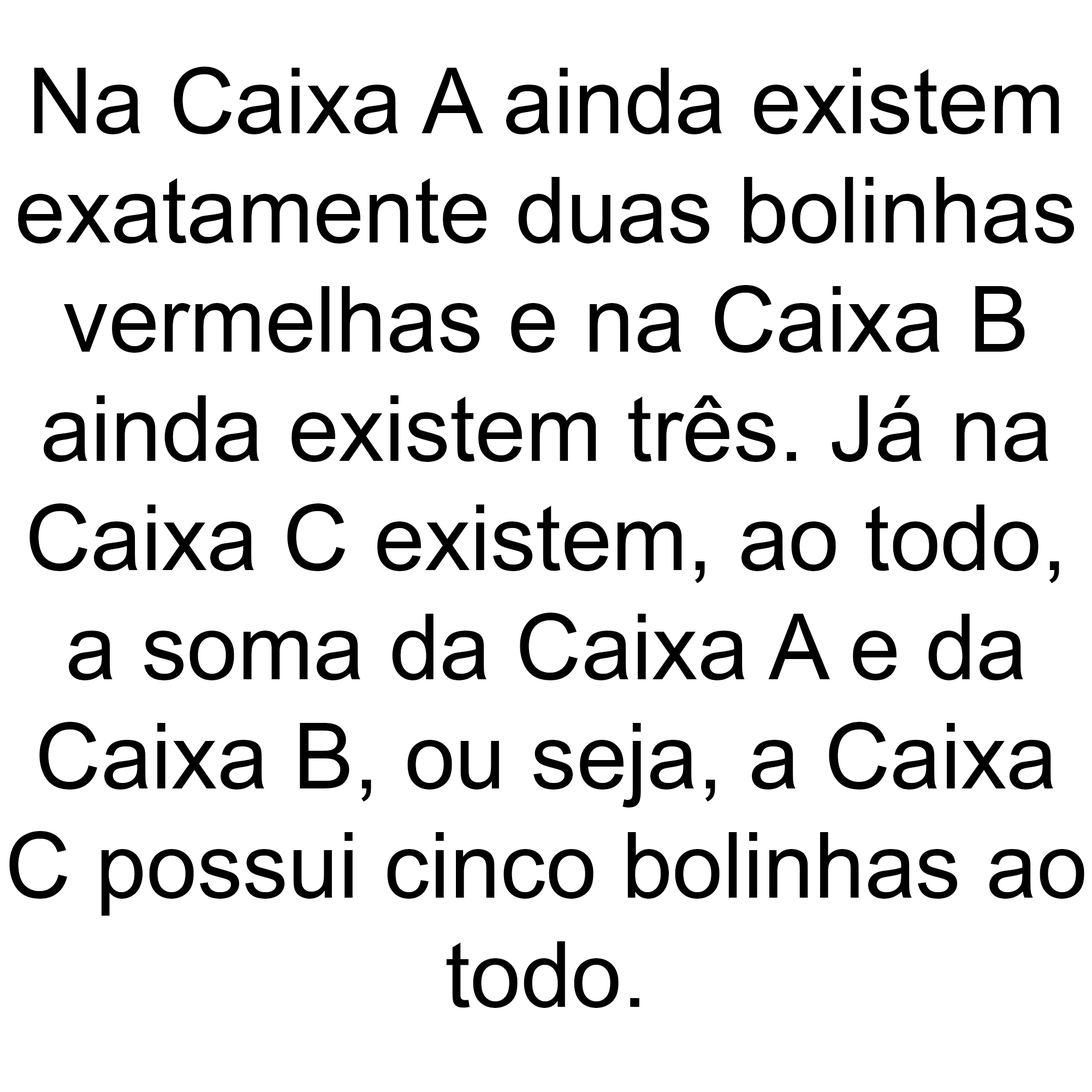
<style>
.page{position:relative;width:1092px;height:1092px;background:#ffffff}
.page>*{position:absolute;margin:0}
.t1{font:91px "ArialMT";color:#000000}
</style>
<div class="page">
<p class="t1" style="left:9px;top:67px;width:1075px;height:941px;text-align:center">Na Caixa A ainda existem<br>exatamente duas bolinhas<br>vermelhas e na Caixa B<br>ainda existem três. Já na<br>Caixa C existem, ao todo,<br>a soma da Caixa A e da<br>Caixa B, ou seja, a Caixa<br>C possui cinco bolinhas ao<br>todo.</p>
</div>
